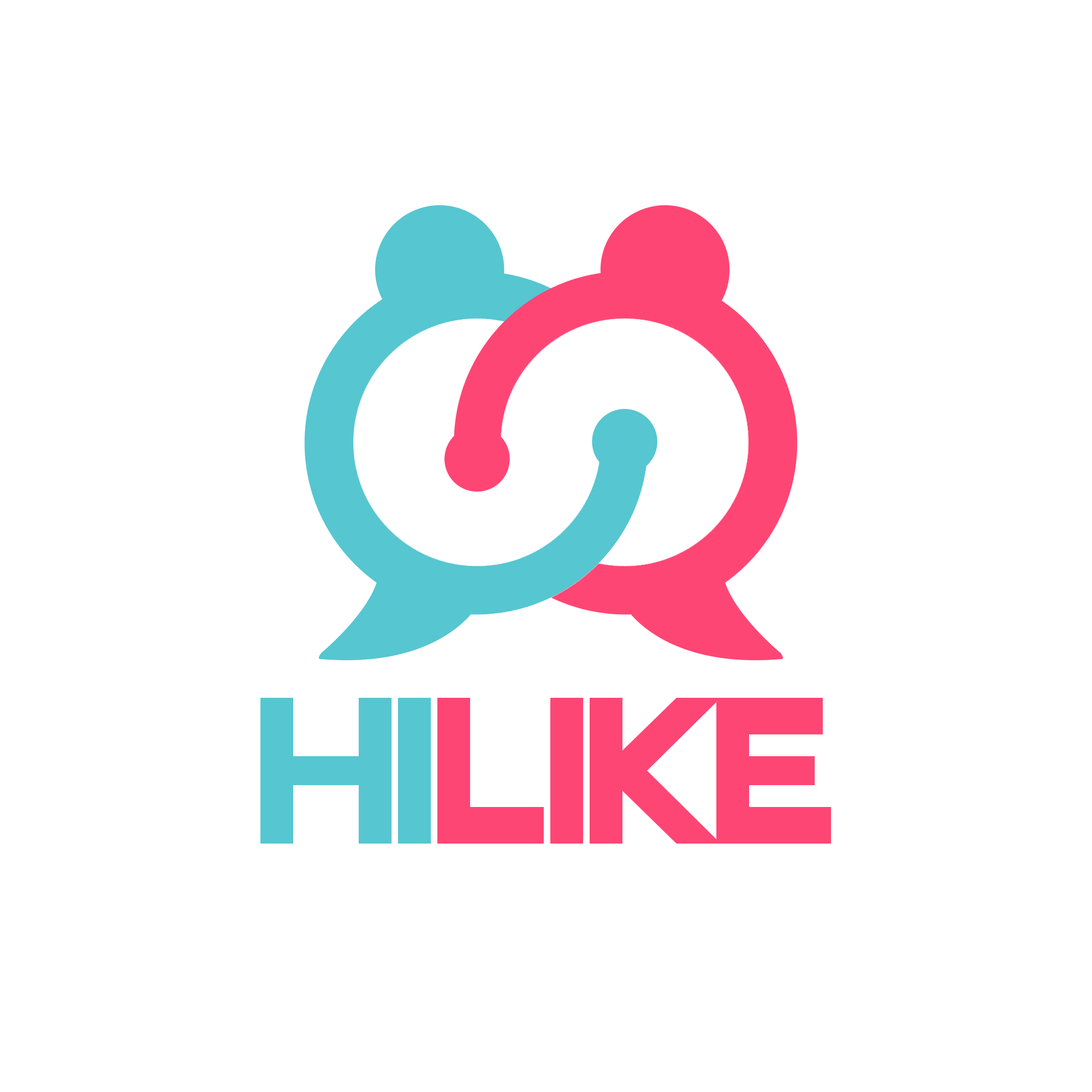
<style>
.page{position:relative;width:1092px;height:1092px;background:#ffffff}
.page>*{position:absolute;margin:0}
.t1{font:218.4px "SFAutomatonCondensed";color:#fe4674}
.t2{font:218.4px "SFAutomatonCondensed";color:#56c6d1}
</style>
<div class="page">
<p class="t1" style="left:260px;top:698px;width:571px;height:146px"><span class="t2">HI</span>LIKE</p>
</div>
